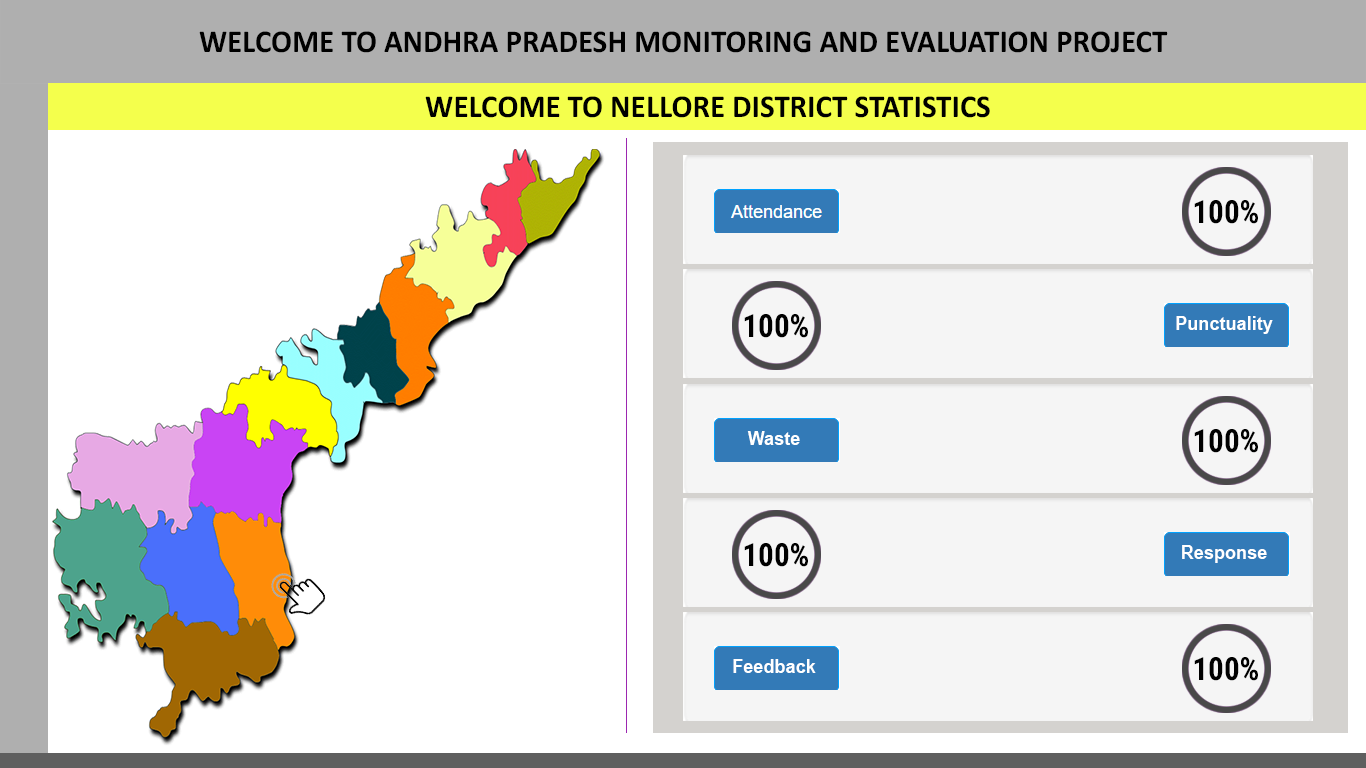
<style>
.page{position:relative;width:1366px;height:768px;background:#ffffff}
.page>*{position:absolute;margin:0}
.t1{font:32px "Calibri-Bold";color:#000000;scale:0.97 1}
.t2{font:32px "RobotoCondensed-Bold";color:#000000;scale:0.97 1}
.t3{font:18.7px "Arial-BoldMT";color:#ffffff;scale:0.97 1}
</style>
<div class="page">
<p class="t1" style="left:199px;top:31px;width:969px;height:22px">WELCOME TO ANDHRA PRADESH MONITORING AND EVALUATION PROJECT</p>
<p class="t1" style="left:425px;top:96px;width:565px;height:22px">WELCOME TO NELLORE DISTRICT STATISTICS</p>
<p class="t2" style="left:1194px;top:200px;width:64px;height:24px">100%</p>
<p class="t2" style="left:744px;top:314px;width:64px;height:24px">100%</p>
<p class="t2" style="left:1194px;top:429px;width:64px;height:24px">100%</p>
<p class="t2" style="left:744px;top:543px;width:64px;height:24px">100%</p>
<p class="t3" style="left:733px;top:659px;width:83px;height:14px">Feedback</p>
<p class="t2" style="left:1194px;top:657px;width:64px;height:24px">100%</p>
</div>
